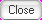
<style>
.page{position:relative;width:42px;height:20px}
.page>*{position:absolute;margin:0}
.t1{font:7px "MS Sans Serif";color:#3b3b3b;font-weight:bold}
</style>
<div class="page">
<p class="t1" style="left:9px;top:5px;width:25px;height:9px">Close</p>
</div>
